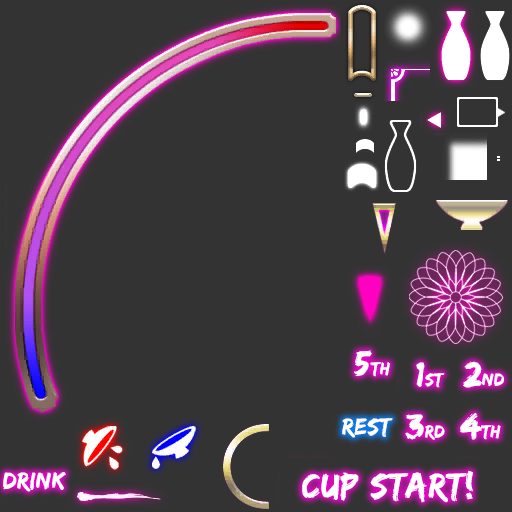
<style>
.page{position:relative;width:512px;height:512px;background:#333333}
.page>*{position:absolute;margin:0}
.t1{font:18px "EdoSZ";letter-spacing:0.03em;color:#ffffff}
.t2{font:36px "EdoSZ";letter-spacing:0.03em;color:#ffffff}
.t3{font:24px "EdoSZ";letter-spacing:0.03em;color:#ffffff}
</style>
<div class="page">
<p class="t1" style="left:354px;top:350px;width:36px;height:27px"><span class="t2">5</span>th</p>
<p class="t1" style="left:416px;top:362px;width:29px;height:26px"><span class="t2">1</span>st</p>
<p class="t1" style="left:463px;top:361px;width:41px;height:27px"><span class="t2">2</span>nd</p>
<p class="t1" style="left:405px;top:414px;width:40px;height:26px"><span class="t2">3</span>rd</p>
<p class="t1" style="left:460px;top:413px;width:41px;height:27px"><span class="t2">4</span>th</p>
<p class="t3" style="left:342px;top:418px;width:51px;height:20px">REST</p>
<p class="t3" style="left:3px;top:472px;width:63px;height:20px">drink</p>
<p class="t2" style="left:302px;top:470px;width:171px;height:33px">cup start!</p>
</div>
